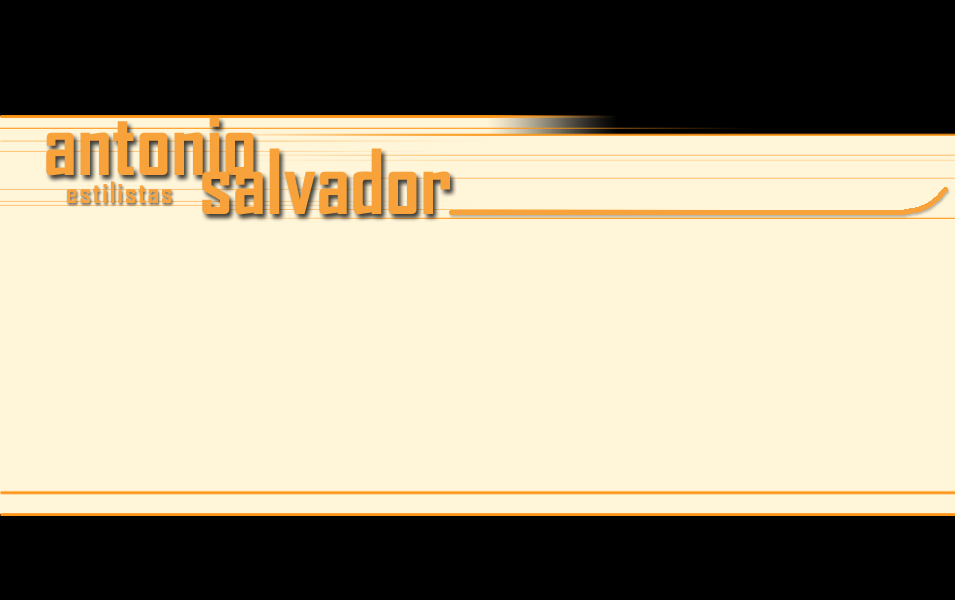
<style>
.page{position:relative;width:955px;height:600px;background:#fff5d9}
.page>*{position:absolute;margin:0}
.t1{font:85.8px "AgencyFB-Bold";color:#f7a23b}
.t2{font:28px "AgencyFB-Bold";letter-spacing:0.075em;color:#f7a23b}
</style>
<div class="page">
<p class="t1" style="left:46px;top:116px;width:208px;height:60px">antonio</p>
<p class="t1" style="left:202px;top:148px;width:248px;height:67px">salvador</p>
<p class="t2" style="left:67px;top:181px;width:105px;height:22px">estilistas</p>
</div>
